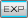
<style>
.page{position:relative;width:28px;height:18px}
.page>*{position:absolute;margin:0}
.t1{font:8px "Eurostile-ExtendedTwo";scale:0.9 1}
</style>
<div class="page">
<p class="t1" style="left:4px;top:6px;width:20px;height:6px">EXP</p>
</div>
